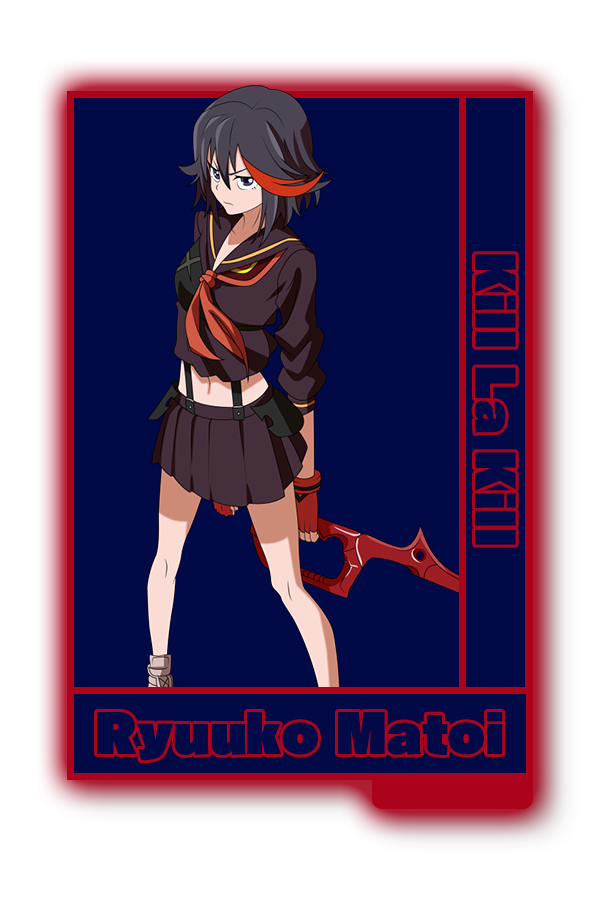
<style>
.page{position:relative;width:600px;height:900px;background:#010947}
.page>*{position:absolute;margin:0}
.t1{font:48.8px "RaglanPunchStd-UB";color:#010947}
.t2{font:50.5px "RaglanPunchStd-UB";color:#010947}
</style>
<div class="page">
<p class="t1" style="left:474px;top:254px;width:42px;height:291px;rotate:90deg">Kill La Kill</p>
<p class="t2" style="left:97px;top:712px;width:406px;height:49px">Ryuuko Matoi</p>
</div>
